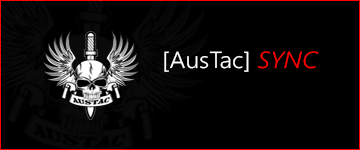
<style>
.page{position:relative;width:360px;height:150px;background:#000000}
.page>*{position:absolute;margin:0}
.t1{font:23.2px "SegoeUI-Semilight";color:#ffffff;scale:1.08 1}
.t2{font:23.2px "SegoeUI-SemilightItalic";color:#fe0000;scale:1.08 1}
</style>
<div class="page">
<p class="t1" style="left:164px;top:51px;width:155px;height:21px">[AusTac] <span class="t2">SYNC</span></p>
</div>
